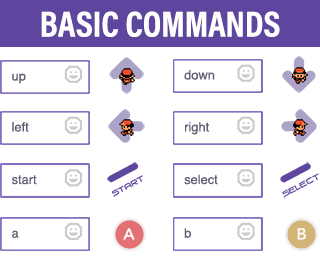
<style>
.page{position:relative;width:320px;height:264px;background:#ffffff}
.page>*{position:absolute;margin:0}
.t1{font:36.3px "AcuminProCond-Bold";color:#ffffff;text-transform:uppercase}
.t2{font:12.9px "Helvetica";color:#645f78}
.t3{font:15.8px "Avenir-Medium";color:#ffffff}
</style>
<div class="page">
<p class="t1" style="left:41px;top:11px;width:239px;height:26px">Basic Commands</p>
<p class="t2" style="left:12px;top:73px;width:14px;height:11px">up</p>
<p class="t2" style="left:184px;top:70px;width:31px;height:10px">down</p>
<p class="t2" style="left:12px;top:122px;width:17px;height:10px">left</p>
<p class="t2" style="left:185px;top:122px;width:24px;height:13px">right</p>
<p class="t2" style="left:184px;top:174px;width:34px;height:11px">select</p>
<p class="t2" style="left:11px;top:175px;width:26px;height:10px">start</p>
<p class="t2" style="left:12px;top:230px;width:7px;height:8px">a</p>
<p class="t3" style="left:123px;top:228px;width:12px;height:12px">A</p>
<p class="t2" style="left:184px;top:228px;width:7px;height:10px">b</p>
<p class="t3" style="left:297px;top:228px;width:9px;height:12px">B</p>
</div>
